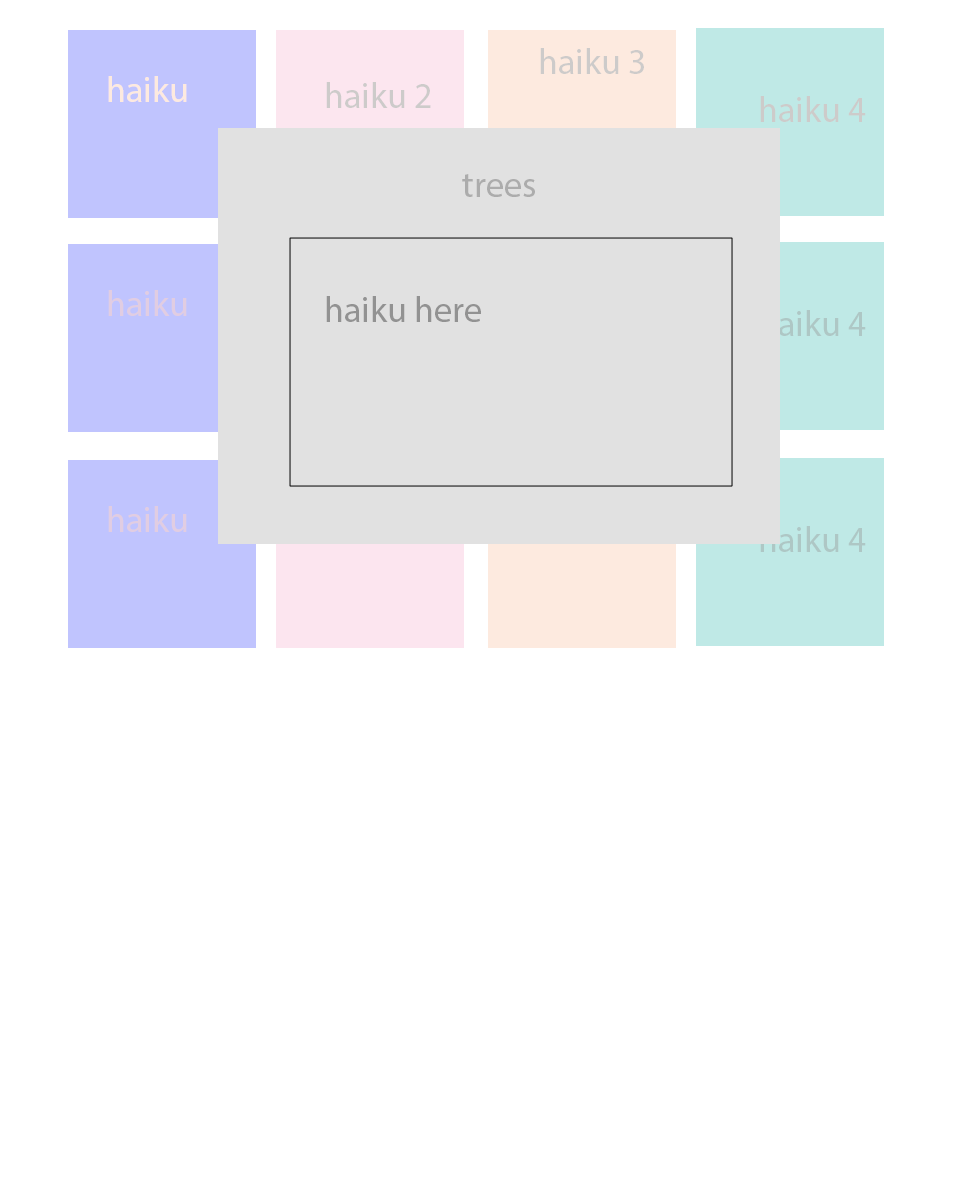
<style>
.page{position:relative;width:960px;height:1200px;background:#ffffff}
.page>*{position:absolute;margin:0}
.t1{font:36px "MyriadPro-Regular";color:#cdcbca}
.t2{font:36px "MyriadPro-Regular";color:#fdeadf}
.t3{font:36px "MyriadPro-Regular";color:#acacac}
.t4{font:36px "MyriadPro-Regular";color:#e1cde2}
.t5{font:36px "MyriadPro-Regular";color:#929292}
.t6{font:36px "MyriadPro-Regular";color:#aec7c5}
</style>
<div class="page">
<p class="t1" style="left:540px;top:48px;width:104px;height:26px">haiku 3</p>
<p class="t2" style="left:108px;top:76px;width:79px;height:26px">haiku</p>
<p class="t1" style="left:326px;top:82px;width:105px;height:26px">haiku 2</p>
<p class="t1" style="left:760px;top:96px;width:106px;height:26px">haiku 4</p>
<p class="t3" style="left:462px;top:174px;width:73px;height:23px">trees</p>
<p class="t4" style="left:108px;top:290px;width:79px;height:26px">haiku</p>
<p class="t5" style="left:326px;top:296px;width:155px;height:26px">haiku here</p>
<p class="t6" style="left:760px;top:310px;width:106px;height:26px">haiku 4</p>
<p class="t4" style="left:108px;top:506px;width:79px;height:26px">haiku</p>
<p class="t6" style="left:760px;top:526px;width:106px;height:26px">haiku 4</p>
</div>
